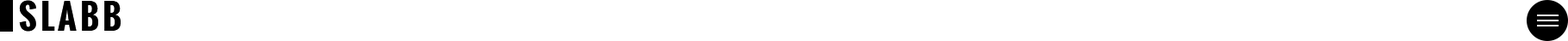
<style>
.page{position:relative;width:1568px;height:41px;background:#ffffff}
.page>*{position:absolute;margin:0}
.t1{font:34.5px "Oswald-Bold";letter-spacing:0.1em;color:#000000;text-transform:uppercase}
</style>
<div class="page">
<p class="t1" style="left:19px;top:0px;width:102px;height:32px">Slabb</p>
</div>
